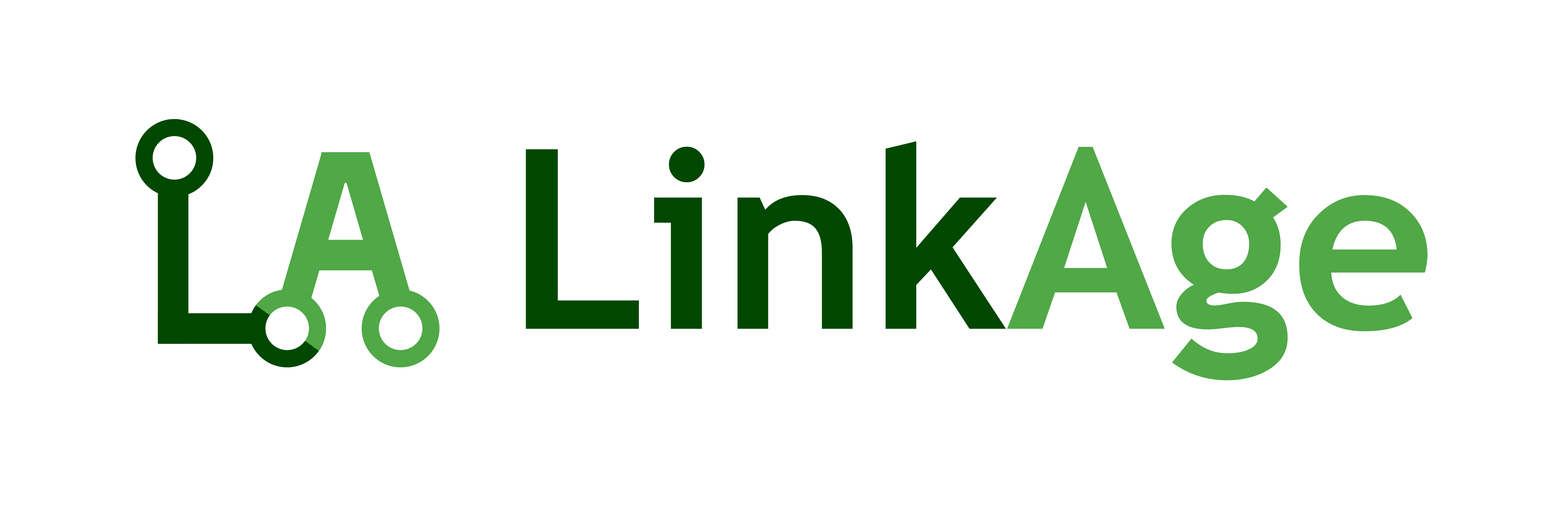
<style>
.page{position:relative;width:1568px;height:507px;background:#ffffff}
.page>*{position:absolute;margin:0}
.t1{font:250.8px "TrebuchetMS-Bold";color:#004700}
.t2{font:250.8px "TrebuchetMS-Bold";color:#50a847}
</style>
<div class="page">
<p class="t1" style="left:526px;top:141px;width:902px;height:239px">Link<span class="t2">Age</span></p>
</div>
